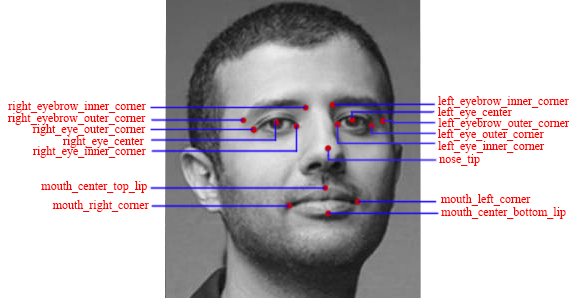
<style>
.page{position:relative;width:576px;height:298px;background:#ffffff}
.page>*{position:absolute;margin:0}
.t1{font:12px "TimesNewRomanPSMT";color:#ff0000}
</style>
<div class="page">
<p class="t1" style="left:8px;top:101px;width:138px;height:12px">right_eyebrow_inner_corner</p>
<p class="t1" style="left:438px;top:96px;width:131px;height:12px">left_eyebrow_inner_corner</p>
<p class="t1" style="left:8px;top:113px;width:138px;height:12px">right_eyebrow_outer_corner</p>
<p class="t1" style="left:438px;top:107px;width:74px;height:12px">left_eye_center</p>
<p class="t1" style="left:32px;top:124px;width:114px;height:12px">right_eye_outer_corner</p>
<p class="t1" style="left:438px;top:118px;width:132px;height:12px">left_eyebrow_outer_corner</p>
<p class="t1" style="left:63px;top:136px;width:81px;height:12px">right_eye_center</p>
<p class="t1" style="left:438px;top:129px;width:106px;height:12px">left_eye_outer_corner</p>
<p class="t1" style="left:33px;top:146px;width:113px;height:12px">right_eye_inner_corner</p>
<p class="t1" style="left:438px;top:141px;width:107px;height:12px">left_eye_inner_corner</p>
<p class="t1" style="left:439px;top:154px;width:41px;height:12px">nose_tip</p>
<p class="t1" style="left:41px;top:181px;width:106px;height:12px">mouth_center_top_lip</p>
<p class="t1" style="left:441px;top:194px;width:90px;height:12px">mouth_left_corner</p>
<p class="t1" style="left:52px;top:200px;width:97px;height:12px">mouth_right_corner</p>
<p class="t1" style="left:441px;top:207px;width:125px;height:12px">mouth_center_bottom_lip</p>
</div>
